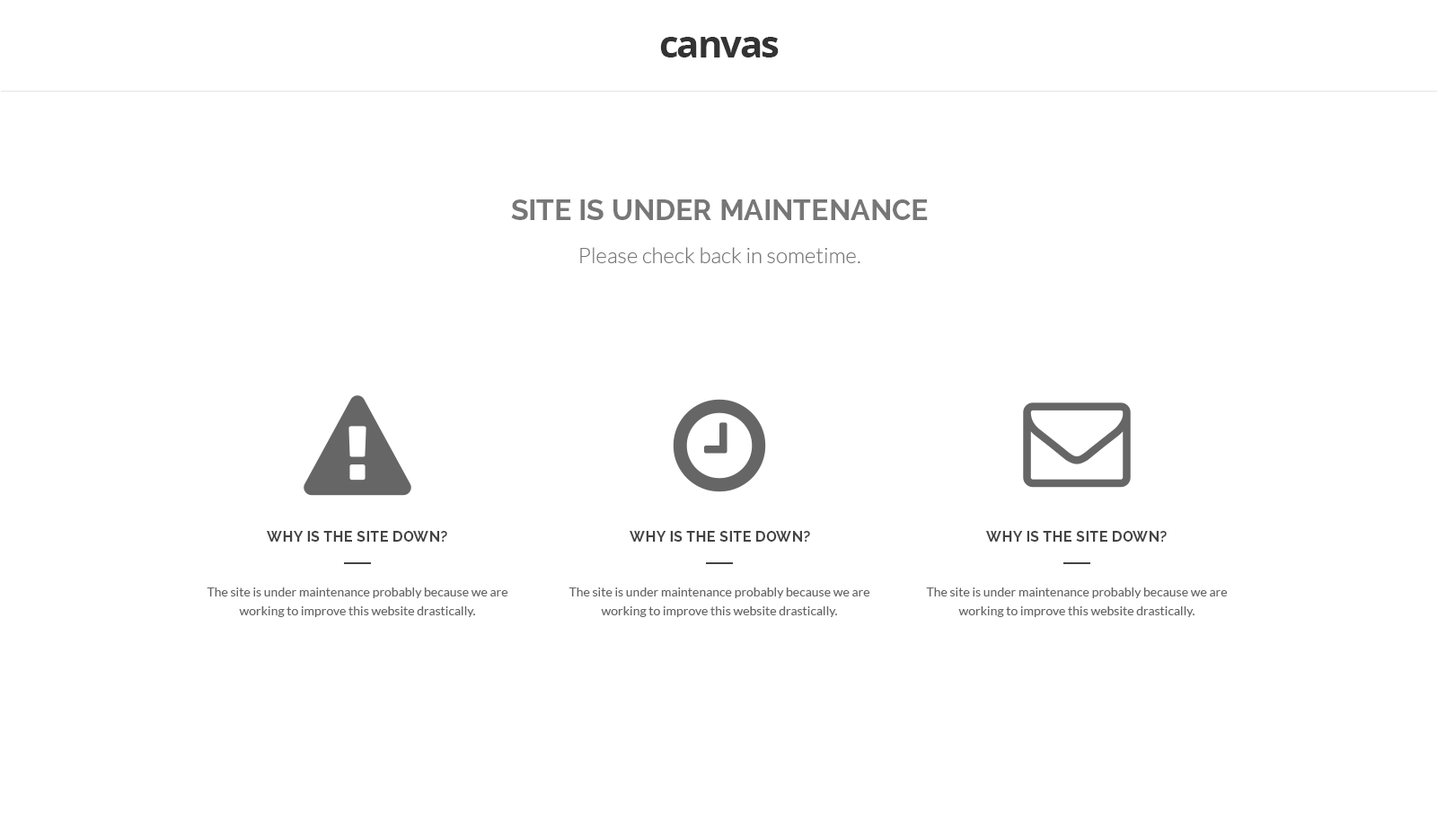
<style>
.page{position:relative;width:1437px;height:830px;background:#ffffff}
.page>*{position:absolute;margin:0}
.t1{font:37.7px "OpenSans-Bold";letter-spacing:-0.05em;color:#333333}
.t2{font:21.6px/43.1px "Lato-Light";color:#777777}
.t3{font:28.7px/43.1px "Raleway-Bold";color:#777777}
.t4{font:14.4px "Raleway-Bold";letter-spacing:0.025em;color:#444444}
.t5{font:12.6px/18.9px "Lato-Regular";color:#666666}
</style>
<div class="page">
<p class="t1" style="left:660px;top:37px;width:119px;height:20px">canvas</p>
<p class="t2" style="left:511px;top:199px;width:417px;height:64px;text-align:center"><span class="t3">SITE IS UNDER MAINTENANCE<br></span>Please check back in sometime.</p>
<p class="t4" style="left:267px;top:531px;width:180px;height:11px">WHY IS THE SITE DOWN?</p>
<p class="t4" style="left:630px;top:531px;width:180px;height:11px">WHY IS THE SITE DOWN?</p>
<p class="t4" style="left:986px;top:531px;width:181px;height:11px">WHY IS THE SITE DOWN?</p>
<p class="t5" style="left:207px;top:587px;width:301px;height:30px;text-align:center">The site is under maintenance probably because we are<br>working to improve this website drastically.</p>
<p class="t5" style="left:568px;top:587px;width:302px;height:30px;text-align:center">The site is under maintenance probably because we are<br>working to improve this website drastically.</p>
<p class="t5" style="left:926px;top:587px;width:302px;height:30px;text-align:center">The site is under maintenance probably because we are<br>working to improve this website drastically.</p>
</div>
